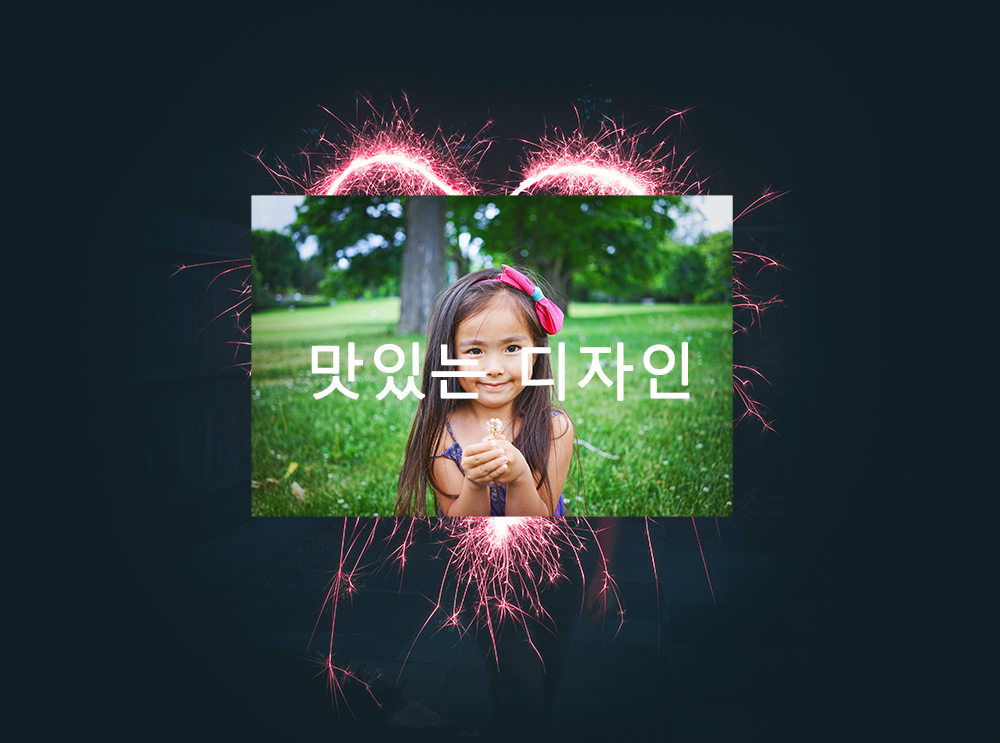
<style>
.page{position:relative;width:1000px;height:743px;background:#111e26}
.page>*{position:absolute;margin:0}
.t1{font:60px "MalgunGothic";color:#ffffff;font-weight:bold}
</style>
<div class="page">
<p class="t1" style="left:311px;top:342px;width:379px;height:59px">맛있는 디자인</p>
</div>
